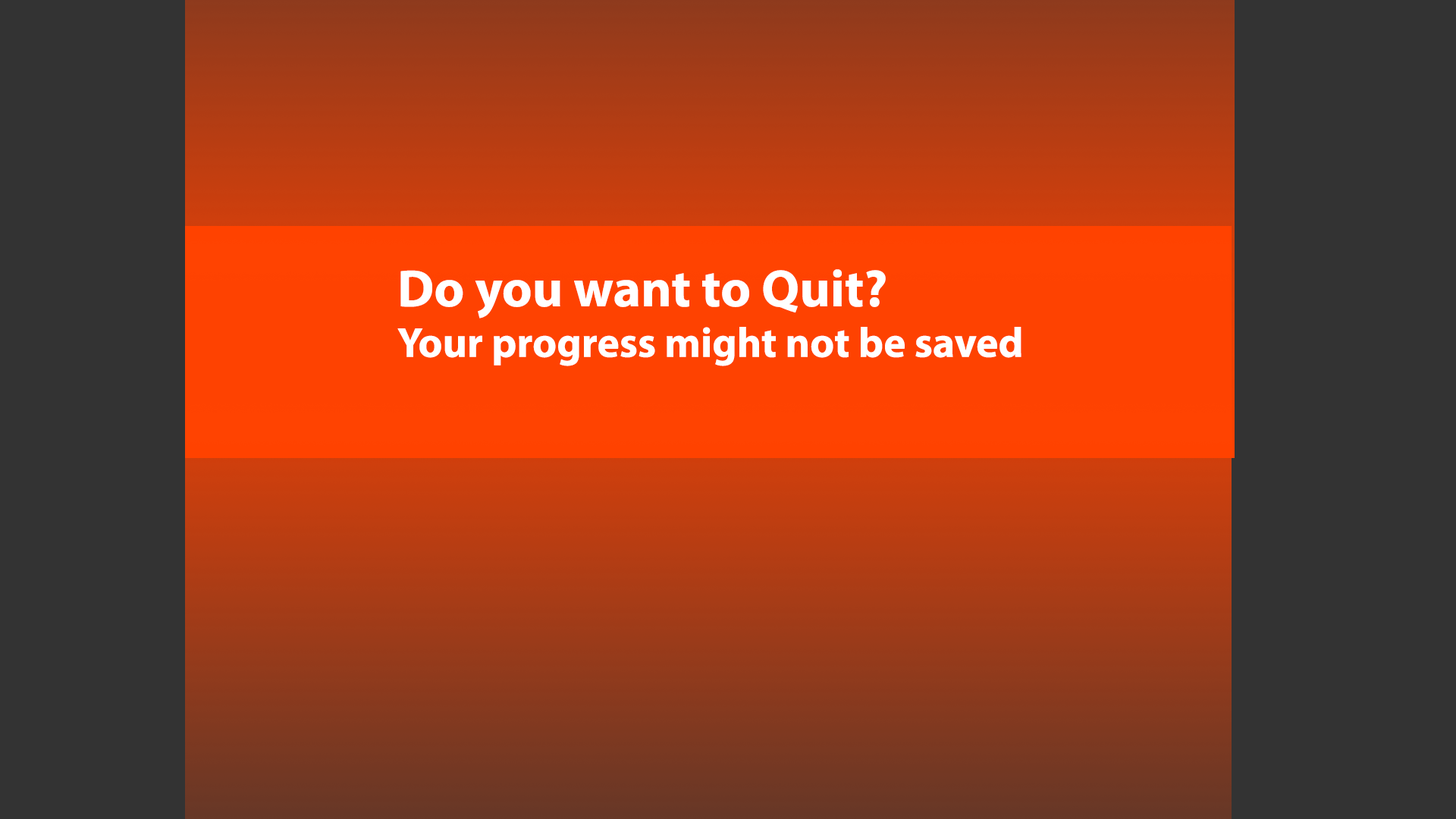
<style>
.page{position:relative;width:1456px;height:819px;background:#333333}
.page>*{position:absolute;margin:0}
.t1{font:42.1px "MyriadPro-Bold";color:#ffffff}
.t2{font:52.7px "MyriadPro-Bold";color:#ffffff}
</style>
<div class="page">
<p class="t1" style="left:397px;top:269px;width:624px;height:97px"><span class="t2">Do you want to Quit?<br></span>Your progress might not be saved</p>
</div>
